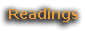
<style>
.page{position:relative;width:85px;height:31px;background:#ffffff}
.page>*{position:absolute;margin:0}
.t1{font:14px "Verdana-Bold";color:#e99d3a}
</style>
<div class="page">
<p class="t1" style="left:9px;top:8px;width:69px;height:14px">Readings</p>
</div>
